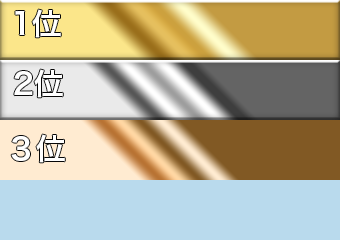
<style>
.page{position:relative;width:340px;height:240px;background:#b9daed}
.page>*{position:absolute;margin:0}
.t1{font:30px "HiraKakuProN-W6";color:#ffffff}
</style>
<div class="page">
<p class="t1" style="left:15px;top:9px;width:46px;height:29px">1位</p>
<p class="t1" style="left:14px;top:69px;width:49px;height:29px">2位</p>
<p class="t1" style="left:11px;top:134px;width:54px;height:29px">３位</p>
</div>
